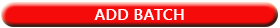
<style>
.page{position:relative;width:280px;height:28px;background:#f60b0b}
.page>*{position:absolute;margin:0}
.t1{font:16.4px "YuGothicUI-Bold";color:#ffffff}
</style>
<div class="page">
<p class="t1" style="left:94px;top:9px;width:90px;height:11px">ADD BATCH</p>
</div>
